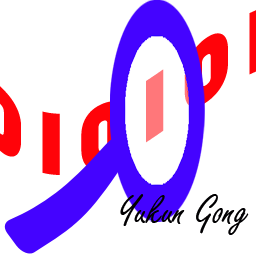
<style>
.page{position:relative;width:256px;height:256px;background:#ffffff}
.page>*{position:absolute;margin:0}
.t1{font:44px "FreestyleScript-Regular";color:#010002}
</style>
<div class="page">
<p class="t1" style="left:120px;top:194px;width:129px;height:41px">Yukun Gong</p>
</div>
